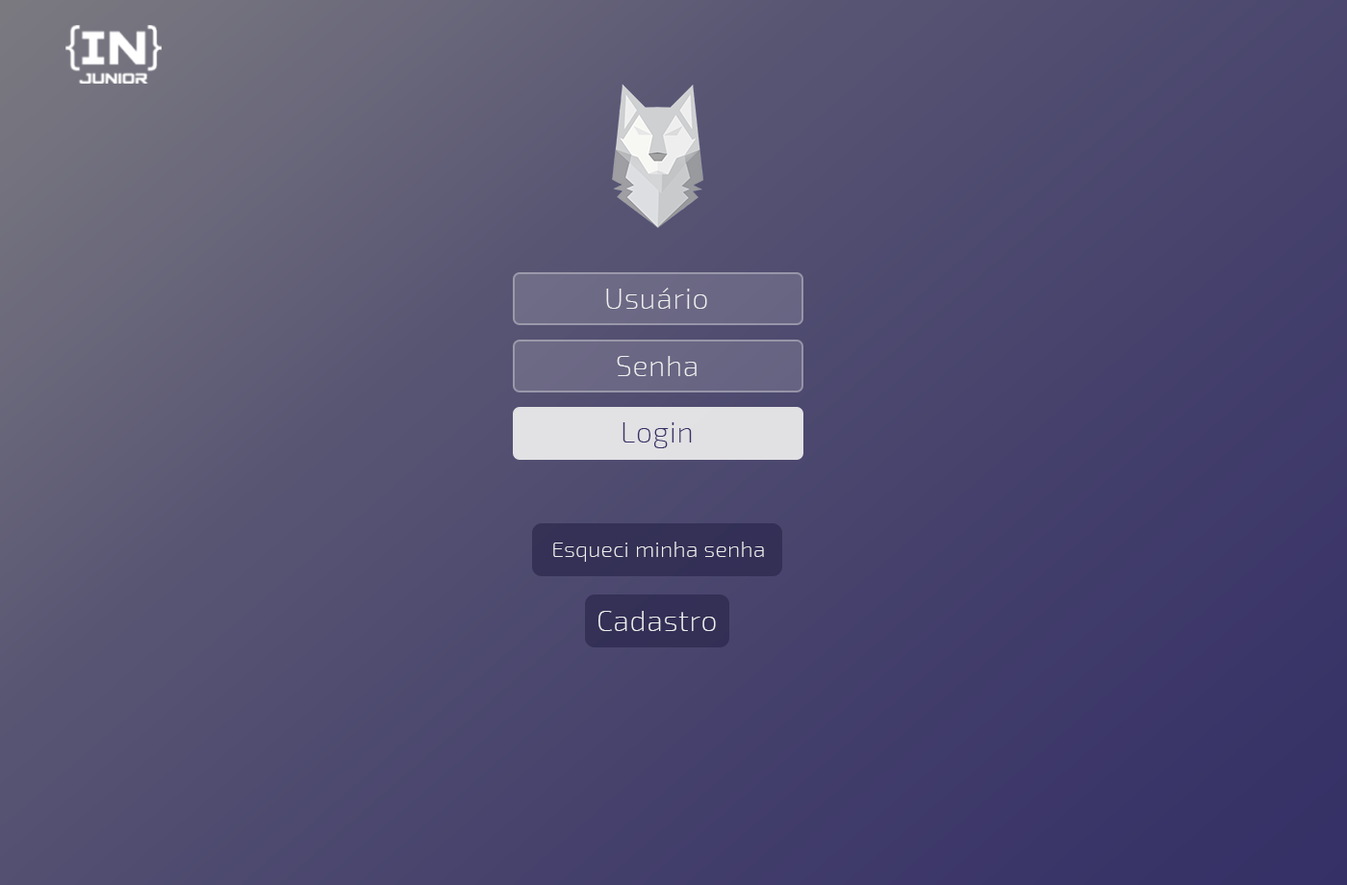
<style>
.page{position:relative;width:1347px;height:885px}
.page>*{position:absolute;margin:0}
.t1{font:29px "Exo2-ExtraLight";letter-spacing:0.025em;color:#eeeeee}
.t2{font:29px "Exo2-ExtraLight";letter-spacing:0.025em;color:#363166}
.t3{font:21.7px "Exo2-ExtraLight";letter-spacing:0.025em;color:#eeeeee}
</style>
<div class="page">
<p class="t1" style="left:606px;top:288px;width:101px;height:21px">Usuário</p>
<p class="t1" style="left:617px;top:356px;width:80px;height:20px">Senha</p>
<p class="t2" style="left:623px;top:422px;width:69px;height:26px">Login</p>
<p class="t3" style="left:553px;top:542px;width:211px;height:20px">Esqueci minha senha</p>
<p class="t1" style="left:598px;top:611px;width:118px;height:20px">Cadastro</p>
</div>
